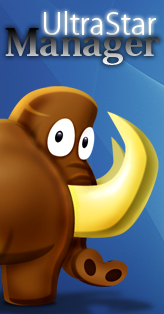
<style>
.page{position:relative;width:164px;height:314px}
.page>*{position:absolute;margin:0}
.t1{font:30px "KozGoPro-Light";color:#ffffff}
.t2{font:36px "KozMinPro-Heavy"}
</style>
<div class="page">
<p class="t1" style="left:44px;top:11px;width:112px;height:24px">UltraStar</p>
<p class="t2" style="left:5px;top:28px;width:155px;height:37px">Manager</p>
</div>
